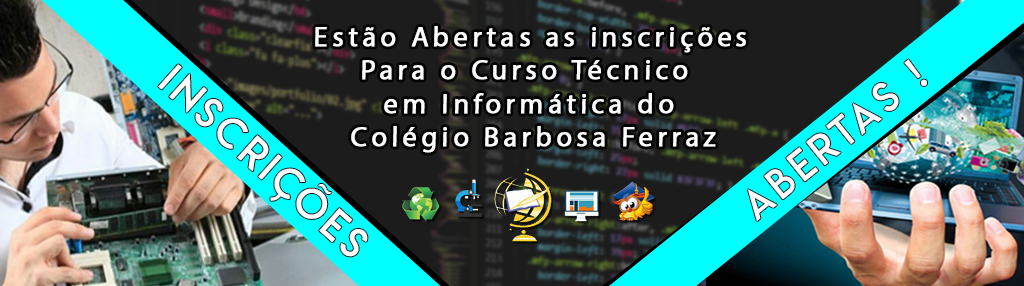
<style>
.page{position:relative;width:1024px;height:286px}
.page>*{position:absolute;margin:0}
.t1{font:27.9px "MyriadPro-Regular";letter-spacing:0.139em;color:#ffffff;font-weight:bold}
.t2{font:40.6px "LemonMilklight";letter-spacing:0.139em;color:#ffffff;font-weight:bold}
</style>
<div class="page">
<p class="t1" style="left:315px;top:26px;width:431px;height:127px;text-align:center">Estão Abertas as inscrições <br>Para o Curso Técnico  <br>em Informática do <br>Colégio Barbosa Ferraz</p>
<p class="t2" style="left:158px;top:64px;width:210px;height:193px;rotate:42deg">Inscrições</p>
<p class="t2" style="left:748px;top:59px;width:179px;height:162px;rotate:-39deg">Abertas !</p>
</div>
